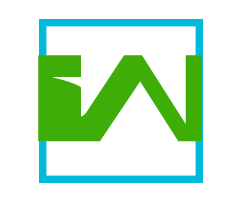
<style>
.page{position:relative;width:241px;height:209px;background:#ffffff}
.page>*{position:absolute;margin:0}
.t1{font:137px "Interdiction";color:#3ead07}
</style>
<div class="page">
<p class="t1" style="left:38px;top:55px;width:164px;height:87px">W</p>
</div>
